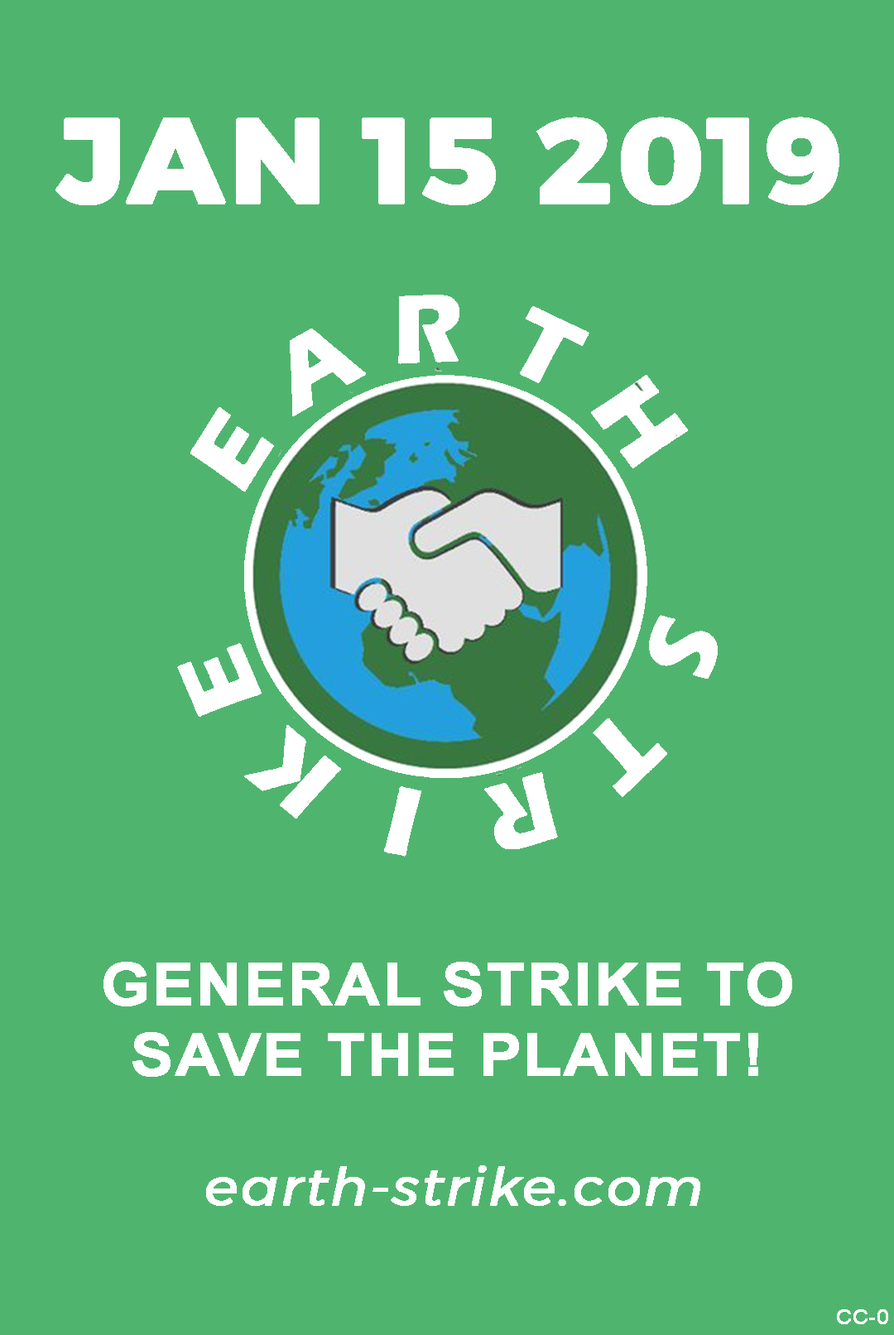
<style>
.page{position:relative;width:894px;height:1335px;background:#4fb56e}
.page>*{position:absolute;margin:0}
.t1{font:117.5px "Montserrat-Bold";letter-spacing:0.02em;color:#ffffff;font-weight:bold;scale:1.05 1}
.t2{font:58.7px "Arial-BoldMT";letter-spacing:0.02em;color:#ffffff;font-weight:bold;scale:1.05 1}
.t3{font:53px "Montserrat-Italic";letter-spacing:0.02em;color:#ffffff;font-weight:bold;scale:1.05 1}
.t4{font:19.9px "ArialMT";letter-spacing:0.02em;color:#ffffff;font-weight:bold;scale:1.05 1}
</style>
<div class="page">
<p class="t1" style="left:55px;top:117px;width:784px;height:88px">JAN 15 2019</p>
<p class="t2" style="left:103px;top:961px;width:689px;height:115px;text-align:center">GENERAL STRIKE TO<br>SAVE THE PLANET!</p>
<p class="t3" style="left:206px;top:1165px;width:494px;height:40px">earth-strike.com</p>
<p class="t4" style="left:836px;top:1309px;width:52px;height:15px">CC-0</p>
</div>
